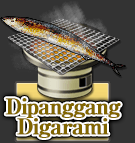
<style>
.page{position:relative;width:135px;height:143px;background:#333333}
.page>*{position:absolute;margin:0}
.t1{font:22px/20px "RyuminPro-ExBold";letter-spacing:-0.08em;color:#816500;font-weight:bold}
</style>
<div class="page">
<p class="t1" style="left:5px;top:98px;width:116px;height:40px;text-align:center">Dipanggang<br>Digarami</p>
</div>
